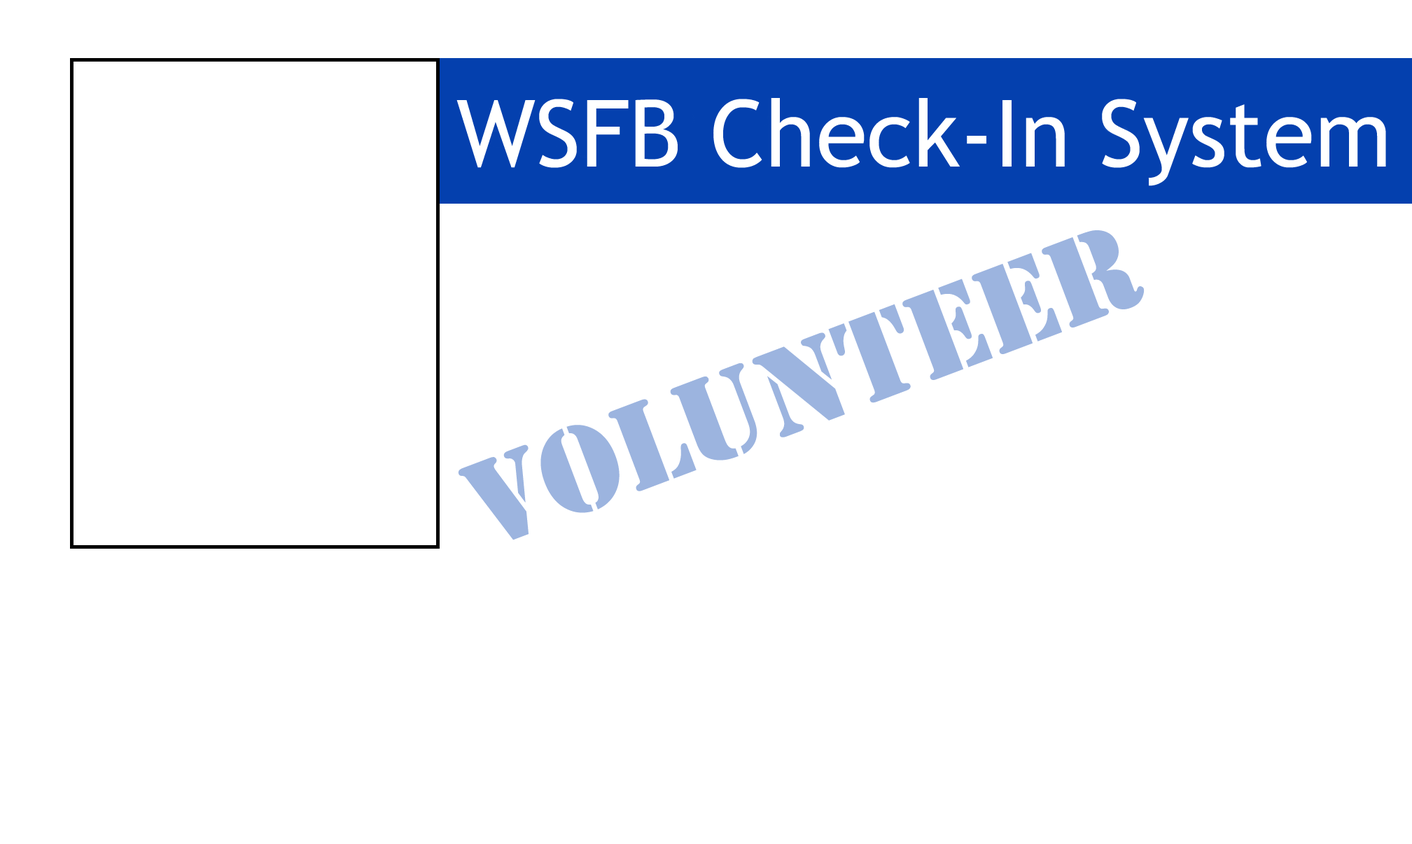
<style>
.page{position:relative;width:1412px;height:844px;background:#ffffff}
.page>*{position:absolute;margin:0}
.t1{font:93px "TrebuchetMS";color:#ffffff}
.t2{font:127px "Stencil";color:#9cb4df}
</style>
<div class="page">
<p class="t1" style="left:456px;top:98px;width:930px;height:88px">WSFB Check-In System</p>
<p class="t2" style="left:458px;top:230px;width:687px;height:311px;rotate:-21deg">VOLUNTEER</p>
</div>
